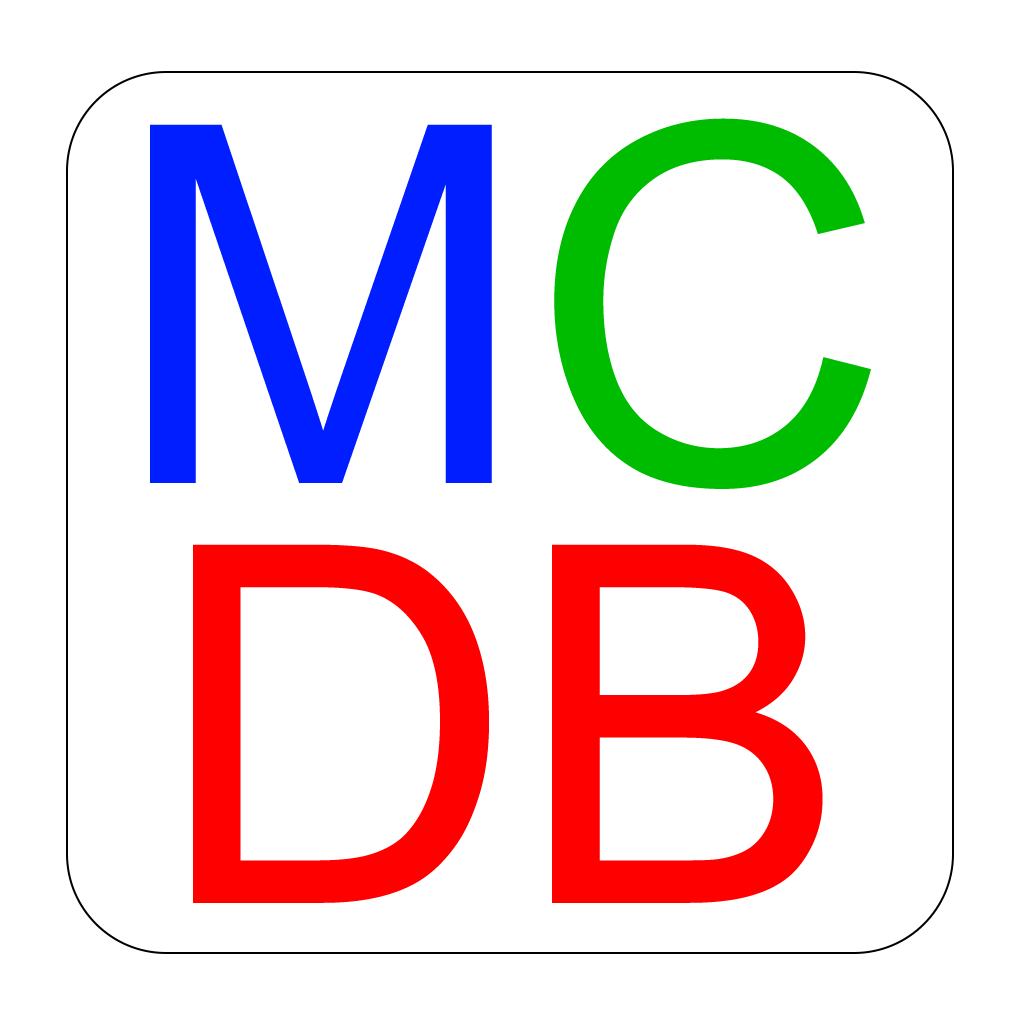
<style>
.page{position:relative;width:1024px;height:1024px;background:#ffffff}
.page>*{position:absolute;margin:0}
.t1{font:500px/420px "ArialMT";color:#ff0000}
.t2{font:500px/420px "ArialMT";color:#001eff}
.t3{font:500px/420px "ArialMT";color:#00bc00}
</style>
<div class="page">
<p class="t1" style="left:150px;top:118px;width:721px;height:785px;text-align:center"><span class="t2">M</span><span class="t3">C<br></span>DB</p>
</div>
